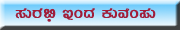
<style>
.page{position:relative;width:180px;height:30px}
.page>*{position:absolute;margin:0}
.t1{font:20px "Kuvempu_Eng_0005";color:#a11d39}
</style>
<div class="page">
<p class="t1" style="left:15px;top:8px;width:141px;height:12px">¸ÀÄgÀ© EAzÀ PÀÄªÉA¥ÀÄ</p>
<p class="t1" style="left:47px;top:19px;width:4px;height:3px">s</p>
</div>
